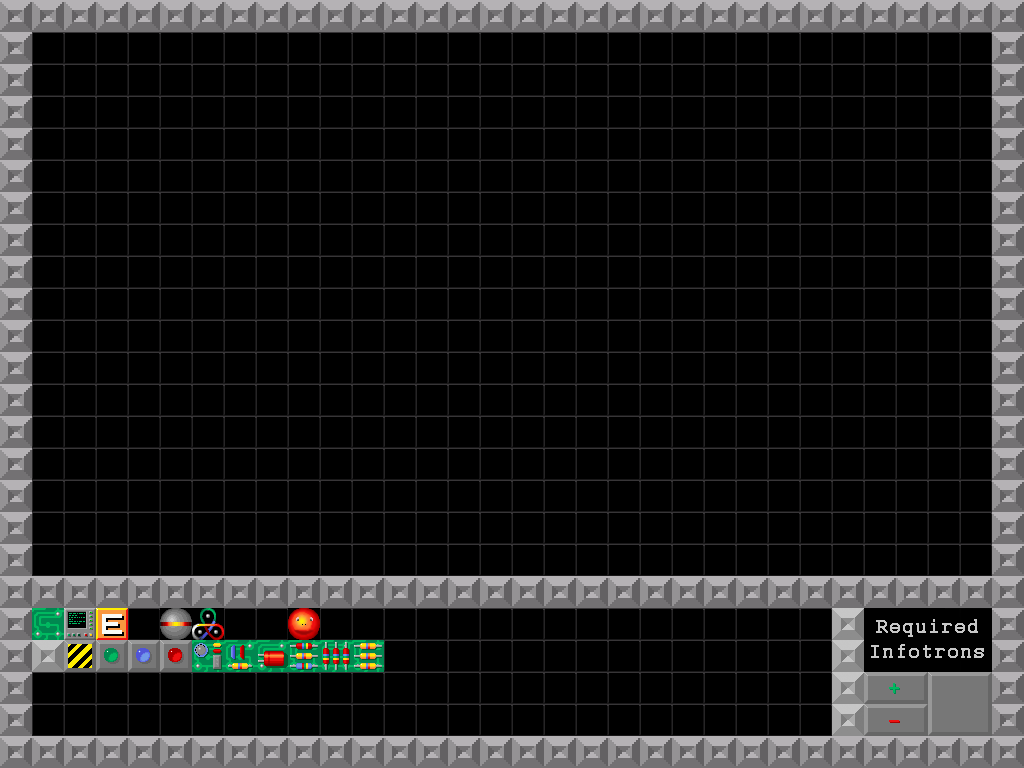
<style>
.page{position:relative;width:1024px;height:768px;background:#000000}
.page>*{position:absolute;margin:0}
.t1{font:21.3px "Courier";color:#c7c7c7;font-weight:bold}
.t2{font:21.3px "Courier";color:#00b860;font-weight:bold}
.t3{font:21.3px "Courier";font-weight:bold}
</style>
<div class="page">
<p class="t1" style="left:871px;top:619px;width:113px;height:39px;text-align:center">Required<br>Infotrons</p>
<p class="t2" style="left:889px;top:683px;width:10px;height:10px">+</p>
<p class="t3" style="left:890px;top:684px;width:10px;height:10px">+</p>
</div>
